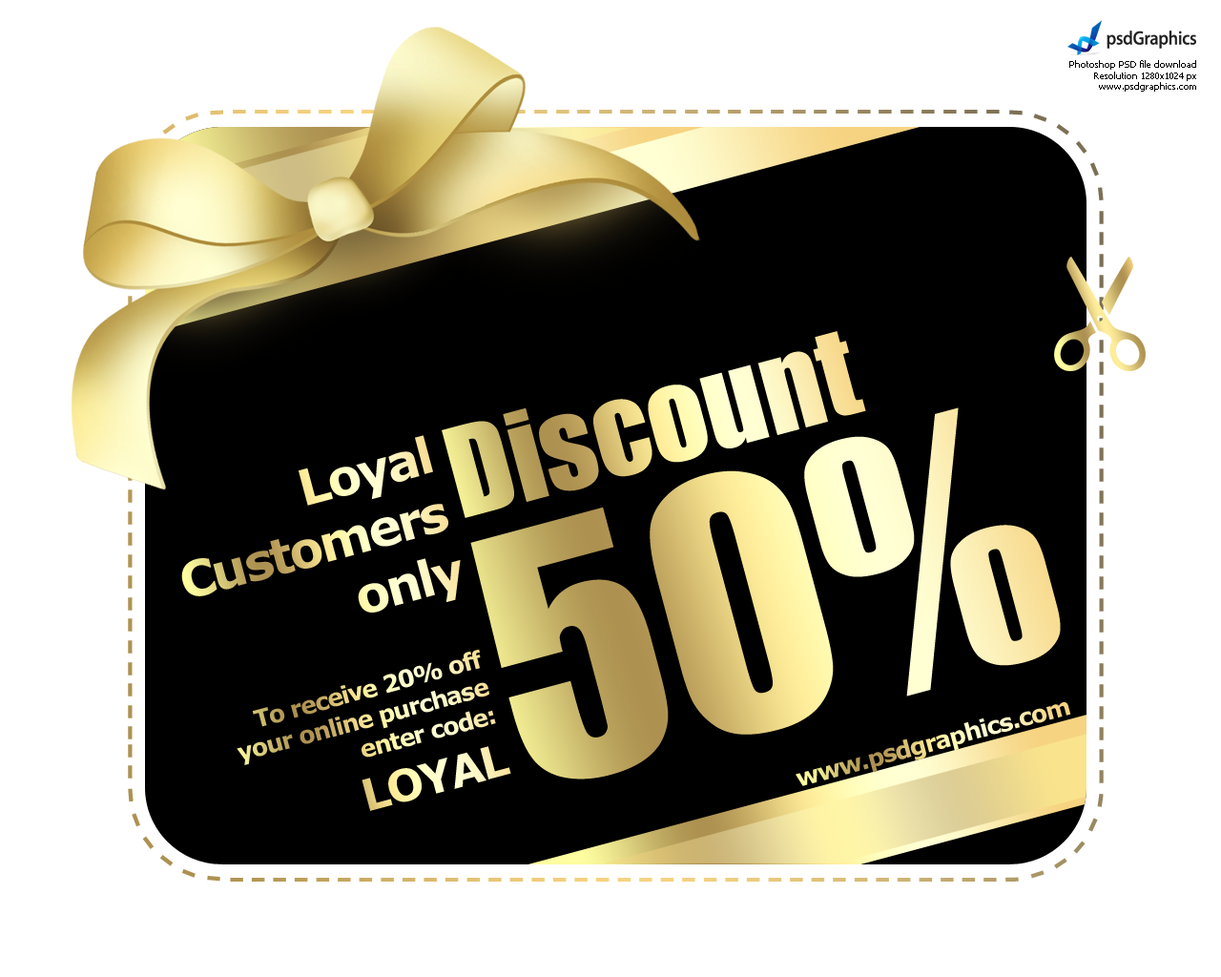
<style>
.page{position:relative;width:1221px;height:977px;background:#ffffff}
.page>*{position:absolute;margin:0}
.t1{font:114.5px "Impact"}
.t2{font:322.8px "Impact"}
.t3{font:49.6px "Verdana-Bold";letter-spacing:-0.05em}
.t4{font:23.8px "Verdana-Bold";letter-spacing:-0.05em}
.t5{font:43.9px "Verdana-Bold";letter-spacing:-0.05em}
</style>
<div class="page">
<p class="t1" style="left:442px;top:331px;width:424px;height:187px;rotate:-15deg">Discount</p>
<p class="t2" style="left:470px;top:407px;width:591px;height:372px;rotate:-15deg">50%</p>
<p class="t3" style="left:181px;top:435px;width:280px;height:177px;text-align:right;rotate:-15deg">Loyal<br>Customers<br>only</p>
<p class="t4" style="left:237px;top:649px;width:274px;height:162px;rotate:-15deg">To receive 20% off your online purchase enter code: <span class="t5">LOYAL</span></p>
</div>
